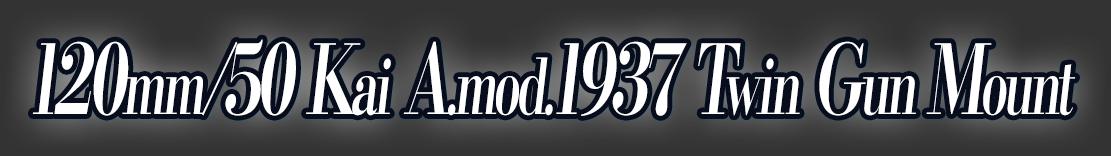
<style>
.page{position:relative;width:1111px;height:156px}
.page>*{position:absolute;margin:0}
.t1{font:96px "KochoStd-Heavy";letter-spacing:-0.08em;color:#ffffff;font-style:italic;scale:0.65 1}
.t2{font:76.8px "KochoStd-Heavy";letter-spacing:-0.08em;color:#ffffff;font-style:italic;scale:0.65 1}
</style>
<div class="page">
<p class="t1" style="left:32px;top:39px;width:1044px;height:77px">120<span class="t2">mm</span>/50 K<span class="t2">ai</span> A<span class="t2">.mod.</span>1937 T<span class="t2">win</span> G<span class="t2">un </span>M<span class="t2">ount</span></p>
</div>
